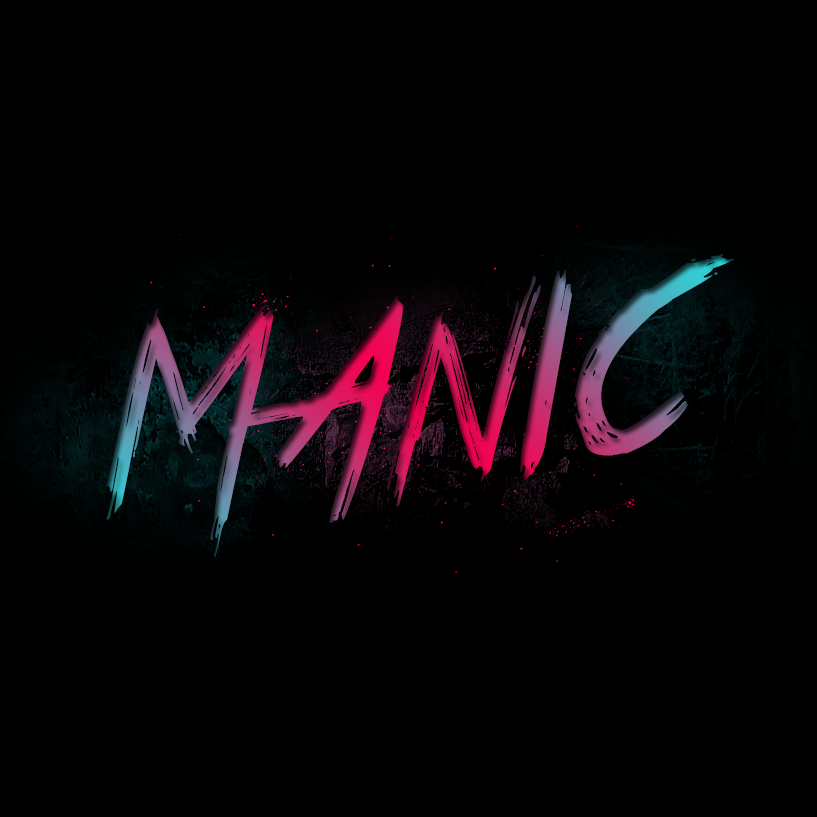
<style>
.page{position:relative;width:817px;height:817px;background:#000000}
.page>*{position:absolute;margin:0}
.t1{font:190px "TrueLies";letter-spacing:-0.01em}
.t2{font:245px "TrueLies";letter-spacing:-0.01em}
.t3{font:200px "TrueLies";letter-spacing:-0.01em}
.t4{font:170px "TrueLies";letter-spacing:-0.01em}
</style>
<div class="page">
<p class="t1" style="left:106px;top:254px;width:628px;height:304px;rotate:-12deg"><span class="t2">M</span><span class="t3">A</span>NI<span class="t4">C</span></p>
</div>
